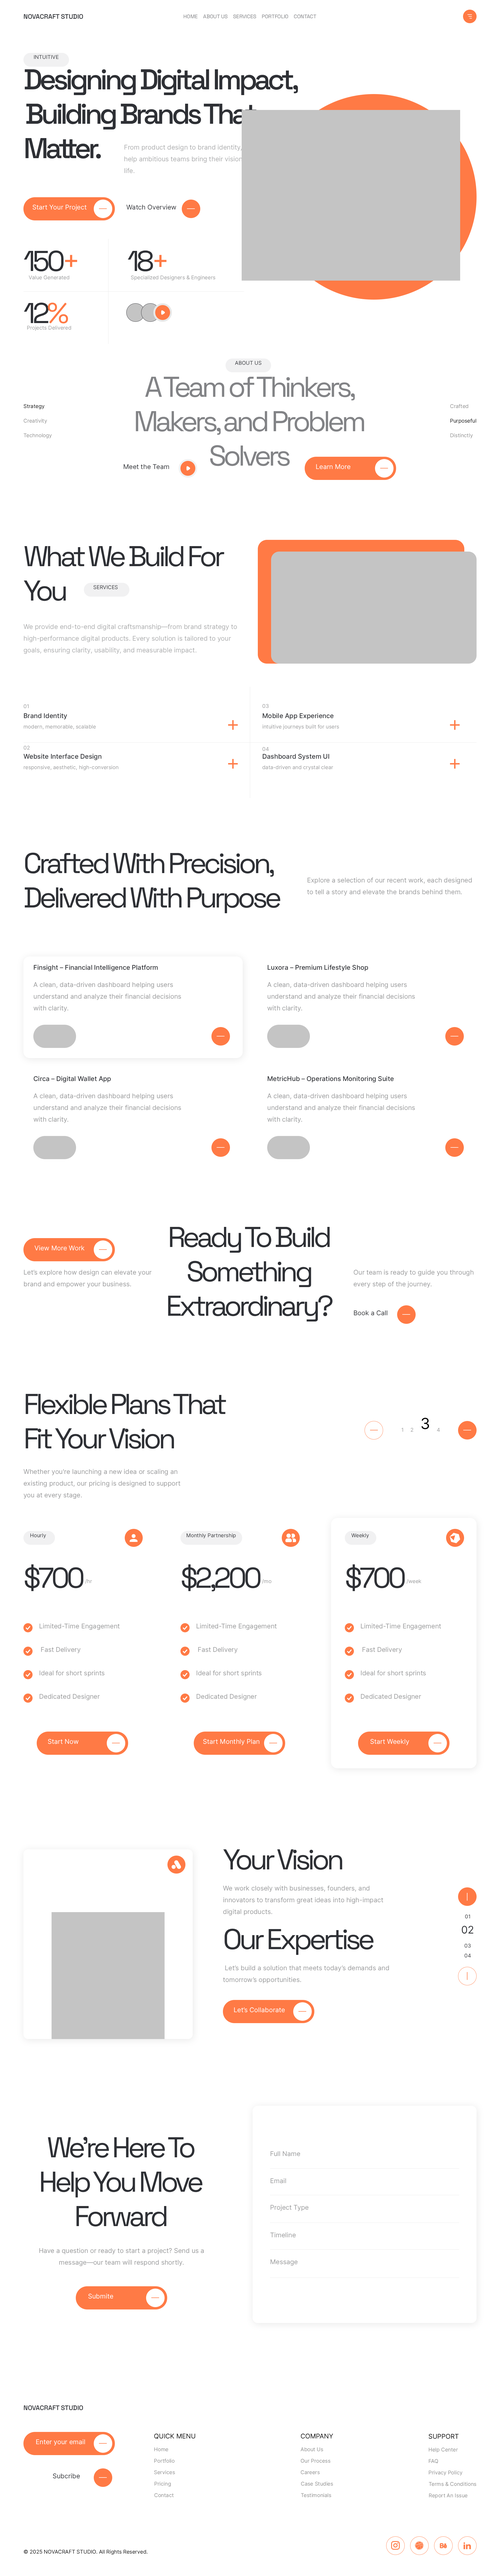
<style>
.page{position:relative;width:500px;height:2576px;background:#ffffff}
.page>*{position:absolute;margin:0}
.t1{font:6.5px "SpaceGrotesk-Medium";color:#2e3035;text-transform:uppercase}
.t2{font:5.2px "SpaceGrotesk-Regular";color:#828386;text-transform:uppercase}
.t3{font:5.2px "Inter-Regular";color:#2e3035;text-transform:uppercase}
.t4{font:28.7px "SpaceGrotesk-Medium";letter-spacing:-0.1em;color:#2e3035}
.t5{font:6.5px/11.7px "Inter-Regular";color:#abacad}
.t6{font:6.5px "Inter-Regular";color:#ffffff}
.t7{font:6.5px "Inter-Regular";color:#2e3035}
.t8{font:28.7px "SpaceGrotesk-Regular";letter-spacing:-0.1em;color:#2e3035}
.t9{font:28.7px "SpaceGrotesk-Regular";letter-spacing:-0.1em;color:#ff7a45}
.t10{font:5.2px "Inter-Regular";color:#98999a}
.t11{font:28.7px "SpaceGrotesk-Regular";letter-spacing:-0.1em;color:#828386}
.t12{font:5.2px "Inter-Regular";color:#000000}
.t13{font:5.2px "Inter-Regular";color:#8d8d8d}
.t14{font:6.5px "Inter-Medium";color:#2e3035}
.t15{font:5.2px "Inter-Regular";color:#98999a;text-transform:uppercase}
.t16{font:6.5px/11.7px "Inter-Regular";color:#98999a}
.t17{font:15.4px "Inter-Regular";color:#000000}
.t18{font:5.2px "Inter-Regular";color:#2e3035}
.t19{font:6.5px "Inter-Regular";color:#98999a}
.t20{font:10.4px "Inter-Regular";color:#2e3035}
.t21{font:6.5px "Inter-Regular";color:#000000;text-transform:uppercase}
.t22{font:5.2px "Inter-Regular";color:#000000;text-transform:uppercase}
</style>
<div class="page">
<p class="t1" style="left:24px;top:14px;width:59px;height:5px">NovaCraft Studio</p>
<p class="t2" style="left:184px;top:14px;width:14px;height:4px">Home</p>
<p class="t2" style="left:203px;top:14px;width:25px;height:4px">About Us</p>
<p class="t2" style="left:233px;top:14px;width:23px;height:4px">Services</p>
<p class="t2" style="left:262px;top:14px;width:26px;height:4px">Portfolio</p>
<p class="t2" style="left:294px;top:14px;width:23px;height:4px">Contact</p>
<p class="t3" style="left:34px;top:55px;width:25px;height:4px">intuitive</p>
<p class="t4" style="left:25px;top:69px;width:273px;height:90px">Designing Digital Impact,<br> Building Brands That Matter.</p>
<p class="t5" style="left:124px;top:145px;width:130px;height:28px">From product design to brand identity, we help ambitious teams bring their visions to life.</p>
<p class="t6" style="left:33px;top:205px;width:54px;height:6px">Start Your Project</p>
<p class="t7" style="left:126px;top:205px;width:50px;height:5px">Watch Overview</p>
<p class="t8" style="left:24px;top:250px;width:53px;height:21px">150<span class="t9">+</span></p>
<p class="t8" style="left:128px;top:250px;width:39px;height:21px">18<span class="t9">+</span></p>
<p class="t10" style="left:29px;top:275px;width:40px;height:5px">Value Generated</p>
<p class="t10" style="left:131px;top:275px;width:84px;height:6px">Specialized Designers &amp; Engineers</p>
<p class="t8" style="left:24px;top:302px;width:44px;height:22px">12<span class="t9">%</span></p>
<p class="t10" style="left:27px;top:326px;width:44px;height:5px">Projects Delivered</p>
<p class="t3" style="left:235px;top:361px;width:27px;height:4px">about us</p>
<p class="t11" style="left:136px;top:377px;width:229px;height:89px;text-align:center">A Team of Thinkers, Makers, and Problem Solvers</p>
<p class="t12" style="left:24px;top:404px;width:21px;height:5px">Strategy</p>
<p class="t13" style="left:450px;top:404px;width:18px;height:4px">Crafted</p>
<p class="t13" style="left:24px;top:419px;width:23px;height:5px">Creativity</p>
<p class="t12" style="left:450px;top:418px;width:27px;height:6px">Purposeful</p>
<p class="t13" style="left:23px;top:433px;width:29px;height:5px">Technology</p>
<p class="t13" style="left:450px;top:433px;width:23px;height:5px">Distinctly</p>
<p class="t7" style="left:124px;top:464px;width:45px;height:5px">Meet the Team</p>
<p class="t6" style="left:316px;top:464px;width:35px;height:5px">Learn More</p>
<p class="t8" style="left:24px;top:546px;width:200px;height:55px">What We Build For You</p>
<p class="t3" style="left:94px;top:585px;width:24px;height:4px">services</p>
<p class="t5" style="left:23px;top:624px;width:214px;height:30px">We provide end-to-end digital craftsmanship—from brand strategy to high-performance digital products. Every solution is tailored to your goals, ensuring clarity, usability, and measurable impact.</p>
<p class="t14" style="left:24px;top:713px;width:43px;height:7px">Brand Identity</p>
<p class="t15" style="left:24px;top:704px;width:5px;height:4px">01</p>
<p class="t14" style="left:263px;top:713px;width:71px;height:7px">Mobile App Experience</p>
<p class="t15" style="left:263px;top:704px;width:6px;height:4px">03</p>
<p class="t10" style="left:24px;top:725px;width:72px;height:5px">modern, memorable, scalable</p>
<p class="t10" style="left:263px;top:724px;width:76px;height:6px">intuitive journeys built for users</p>
<p class="t15" style="left:24px;top:746px;width:6px;height:4px">02</p>
<p class="t15" style="left:263px;top:747px;width:6px;height:4px">04</p>
<p class="t14" style="left:23px;top:753px;width:79px;height:7px">Website Interface Design</p>
<p class="t14" style="left:263px;top:754px;width:66px;height:6px">Dashboard System UI</p>
<p class="t10" style="left:24px;top:765px;width:95px;height:5px">responsive, aesthetic, high-conversion</p>
<p class="t10" style="left:263px;top:765px;width:70px;height:5px">data-driven and crystal clear</p>
<p class="t8" style="left:25px;top:853px;width:256px;height:60px">Crafted With Precision, Delivered With Purpose</p>
<p class="t16" style="left:307px;top:877px;width:165px;height:19px">Explore a selection of our recent work, each designed to tell a story and elevate the brands behind them.</p>
<p class="t14" style="left:34px;top:965px;width:124px;height:6px">Finsight – Financial Intelligence Platform</p>
<p class="t14" style="left:268px;top:965px;width:100px;height:6px">Luxora – Premium Lifestyle Shop</p>
<p class="t16" style="left:33px;top:982px;width:148px;height:30px">A clean, data-driven dashboard helping users understand and analyze their financial decisions with clarity.</p>
<p class="t16" style="left:267px;top:982px;width:148px;height:30px">A clean, data-driven dashboard helping users understand and analyze their financial decisions with clarity.</p>
<p class="t14" style="left:34px;top:1076px;width:77px;height:7px">Circa – Digital Wallet App</p>
<p class="t14" style="left:268px;top:1076px;width:126px;height:7px">MetricHub – Operations Monitoring Suite</p>
<p class="t16" style="left:33px;top:1093px;width:148px;height:30px">A clean, data-driven dashboard helping users understand and analyze their financial decisions with clarity.</p>
<p class="t16" style="left:267px;top:1093px;width:148px;height:30px">A clean, data-driven dashboard helping users understand and analyze their financial decisions with clarity.</p>
<p class="t8" style="left:168px;top:1227px;width:165px;height:94px;text-align:center">Ready To Build Something Extraordinary?</p>
<p class="t6" style="left:34px;top:1245px;width:51px;height:6px">View More Work</p>
<p class="t16" style="left:24px;top:1270px;width:128px;height:18px">Let’s explore how design can elevate your brand and empower your business.</p>
<p class="t16" style="left:354px;top:1270px;width:120px;height:18px">Our team is ready to guide you through every step of the journey.</p>
<p class="t7" style="left:354px;top:1310px;width:34px;height:5px">Book a Call</p>
<p class="t8" style="left:26px;top:1394px;width:200px;height:55px">Flexible Plans That Fit Your Vision</p>
<p class="t17" style="left:422px;top:1418px;width:7px;height:11px">3</p>
<p class="t10" style="left:402px;top:1428px;width:1px;height:4px">1</p>
<p class="t10" style="left:411px;top:1428px;width:2px;height:4px">2</p>
<p class="t10" style="left:437px;top:1428px;width:3px;height:4px">4</p>
<p class="t16" style="left:23px;top:1469px;width:158px;height:30px">Whether you're launching a new idea or scaling an existing product, our pricing is designed to support you at every stage.</p>
<p class="t18" style="left:30px;top:1533px;width:16px;height:6px">Hourly</p>
<p class="t18" style="left:187px;top:1533px;width:49px;height:6px">Monthly Partnership</p>
<p class="t18" style="left:351px;top:1533px;width:18px;height:6px">Weekly</p>
<p class="t8" style="left:25px;top:1564px;width:58px;height:27px">$700</p>
<p class="t8" style="left:182px;top:1564px;width:79px;height:27px">$2,200</p>
<p class="t8" style="left:346px;top:1564px;width:59px;height:27px">$700</p>
<p class="t10" style="left:85px;top:1579px;width:7px;height:5px">/hr</p>
<p class="t10" style="left:262px;top:1579px;width:9px;height:5px">/mo</p>
<p class="t10" style="left:407px;top:1579px;width:15px;height:5px">/week</p>
<p class="t19" style="left:40px;top:1623px;width:80px;height:7px">Limited-Time Engagement</p>
<p class="t19" style="left:197px;top:1623px;width:80px;height:7px">Limited-Time Engagement</p>
<p class="t19" style="left:361px;top:1623px;width:80px;height:7px">Limited-Time Engagement</p>
<p class="t19" style="left:41px;top:1647px;width:40px;height:6px">Fast Delivery</p>
<p class="t19" style="left:198px;top:1647px;width:40px;height:6px">Fast Delivery</p>
<p class="t19" style="left:363px;top:1647px;width:39px;height:6px">Fast Delivery</p>
<p class="t19" style="left:40px;top:1670px;width:64px;height:7px">Ideal for short sprints</p>
<p class="t19" style="left:197px;top:1670px;width:65px;height:7px">Ideal for short sprints</p>
<p class="t19" style="left:361px;top:1670px;width:65px;height:7px">Ideal for short sprints</p>
<p class="t19" style="left:40px;top:1694px;width:60px;height:6px">Dedicated Designer</p>
<p class="t19" style="left:197px;top:1694px;width:60px;height:6px">Dedicated Designer</p>
<p class="t19" style="left:361px;top:1694px;width:60px;height:6px">Dedicated Designer</p>
<p class="t6" style="left:48px;top:1739px;width:31px;height:5px">Start Now</p>
<p class="t6" style="left:203px;top:1739px;width:57px;height:6px">Start Monthly Plan</p>
<p class="t6" style="left:370px;top:1739px;width:40px;height:6px">Start Weekly</p>
<p class="t8" style="left:223px;top:1849px;width:119px;height:21px">Your Vision</p>
<p class="t16" style="left:223px;top:1885px;width:161px;height:31px">We work closely with businesses, founders, and innovators to transform great ideas into high-impact digital products.</p>
<p class="t20" style="left:462px;top:1926px;width:12px;height:8px">02</p>
<p class="t18" style="left:465px;top:1914px;width:5px;height:5px">01</p>
<p class="t8" style="left:225px;top:1929px;width:149px;height:26px">Our Expertise</p>
<p class="t18" style="left:465px;top:1944px;width:6px;height:4px">03</p>
<p class="t18" style="left:465px;top:1954px;width:6px;height:4px">04</p>
<p class="t16" style="left:223px;top:1965px;width:166px;height:19px">Let’s build a solution that meets today’s demands and tomorrow’s opportunities.</p>
<p class="t6" style="left:234px;top:2007px;width:51px;height:5px">Let’s Collaborate</p>
<p class="t8" style="left:41px;top:2137px;width:162px;height:90px;text-align:center">We’re Here To Help You Move Forward</p>
<p class="t19" style="left:271px;top:2151px;width:29px;height:5px">Full Name</p>
<p class="t19" style="left:271px;top:2178px;width:15px;height:5px">Email</p>
<p class="t19" style="left:271px;top:2205px;width:38px;height:6px">Project Type</p>
<p class="t19" style="left:270px;top:2232px;width:26px;height:6px">Timeline</p>
<p class="t16" style="left:39px;top:2248px;width:165px;height:18px;text-align:center">Have a question or ready to start a project? Send us a message—our team will respond shortly.</p>
<p class="t19" style="left:271px;top:2259px;width:27px;height:7px">Message</p>
<p class="t6" style="left:88px;top:2294px;width:25px;height:5px">Submite</p>
<p class="t1" style="left:24px;top:2405px;width:59px;height:5px">NovaCraft Studio</p>
<p class="t6" style="left:36px;top:2439px;width:49px;height:7px">Enter your email</p>
<p class="t21" style="left:154px;top:2433px;width:41px;height:6px">Quick Menu</p>
<p class="t21" style="left:301px;top:2433px;width:32px;height:6px">Company</p>
<p class="t21" style="left:429px;top:2434px;width:30px;height:5px">Support</p>
<p class="t13" style="left:154px;top:2447px;width:14px;height:4px">Home</p>
<p class="t13" style="left:301px;top:2447px;width:22px;height:4px">About Us</p>
<p class="t13" style="left:429px;top:2448px;width:29px;height:5px">Help Center</p>
<p class="t13" style="left:154px;top:2458px;width:21px;height:5px">Portfolio</p>
<p class="t13" style="left:301px;top:2459px;width:30px;height:4px">Our Process</p>
<p class="t13" style="left:429px;top:2459px;width:9px;height:4px">FAQ</p>
<p class="t7" style="left:53px;top:2473px;width:27px;height:6px">Subcribe</p>
<p class="t13" style="left:154px;top:2470px;width:21px;height:4px">Services</p>
<p class="t13" style="left:301px;top:2470px;width:19px;height:4px">Careers</p>
<p class="t13" style="left:429px;top:2470px;width:34px;height:6px">Privacy Policy</p>
<p class="t13" style="left:155px;top:2482px;width:16px;height:5px">Pricing</p>
<p class="t13" style="left:301px;top:2482px;width:32px;height:4px">Case Studies</p>
<p class="t13" style="left:429px;top:2482px;width:48px;height:4px">Terms &amp; Conditions</p>
<p class="t13" style="left:155px;top:2493px;width:19px;height:4px">Contact</p>
<p class="t13" style="left:301px;top:2493px;width:30px;height:4px">Testimonials</p>
<p class="t13" style="left:429px;top:2493px;width:39px;height:6px">Report An Issue</p>
<p class="t12" style="left:24px;top:2550px;width:124px;height:5px">© 2025 <span class="t22">NovaCraft Studio</span>. All Rights Reserved.</p>
</div>
